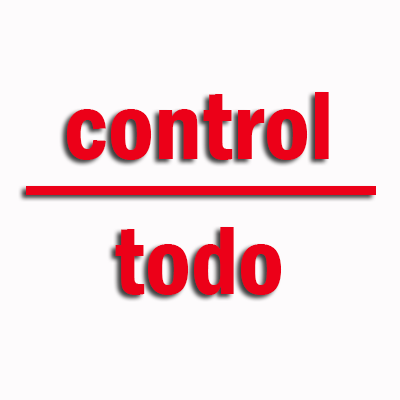
<style>
.page{position:relative;width:400px;height:400px;background:#fdfbfc}
.page>*{position:absolute;margin:0}
.t1{font:100px "FranklinGothic-DemiCond";color:#ec0018}
</style>
<div class="page">
<p class="t1" style="left:66px;top:92px;width:263px;height:68px">control</p>
<p class="t1" style="left:115px;top:227px;width:167px;height:68px">todo</p>
</div>
